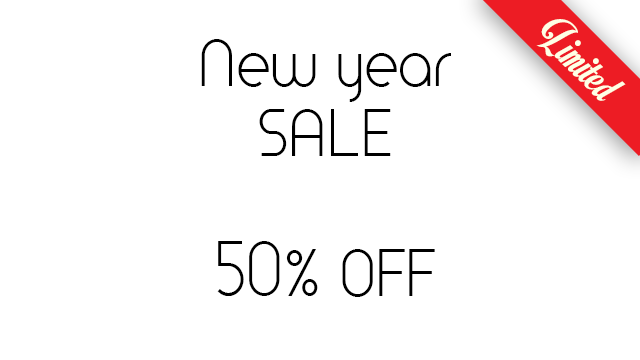
<style>
.page{position:relative;width:640px;height:360px;background:#ffffff}
.page>*{position:absolute;margin:0}
.t1{font:50px "MotionPicturePersonalUse";color:#feffe4;scale:0.92 1}
.t2{font:63.6px "TimeBurner";color:#000000;scale:0.92 1}
</style>
<div class="page">
<p class="t1" style="left:536px;top:19px;width:90px;height:82px;rotate:45deg">Limited</p>
<p class="t2" style="left:201px;top:39px;width:250px;height:258px;text-align:center">New year<br>SALE<br><br>50% OFF</p>
</div>
